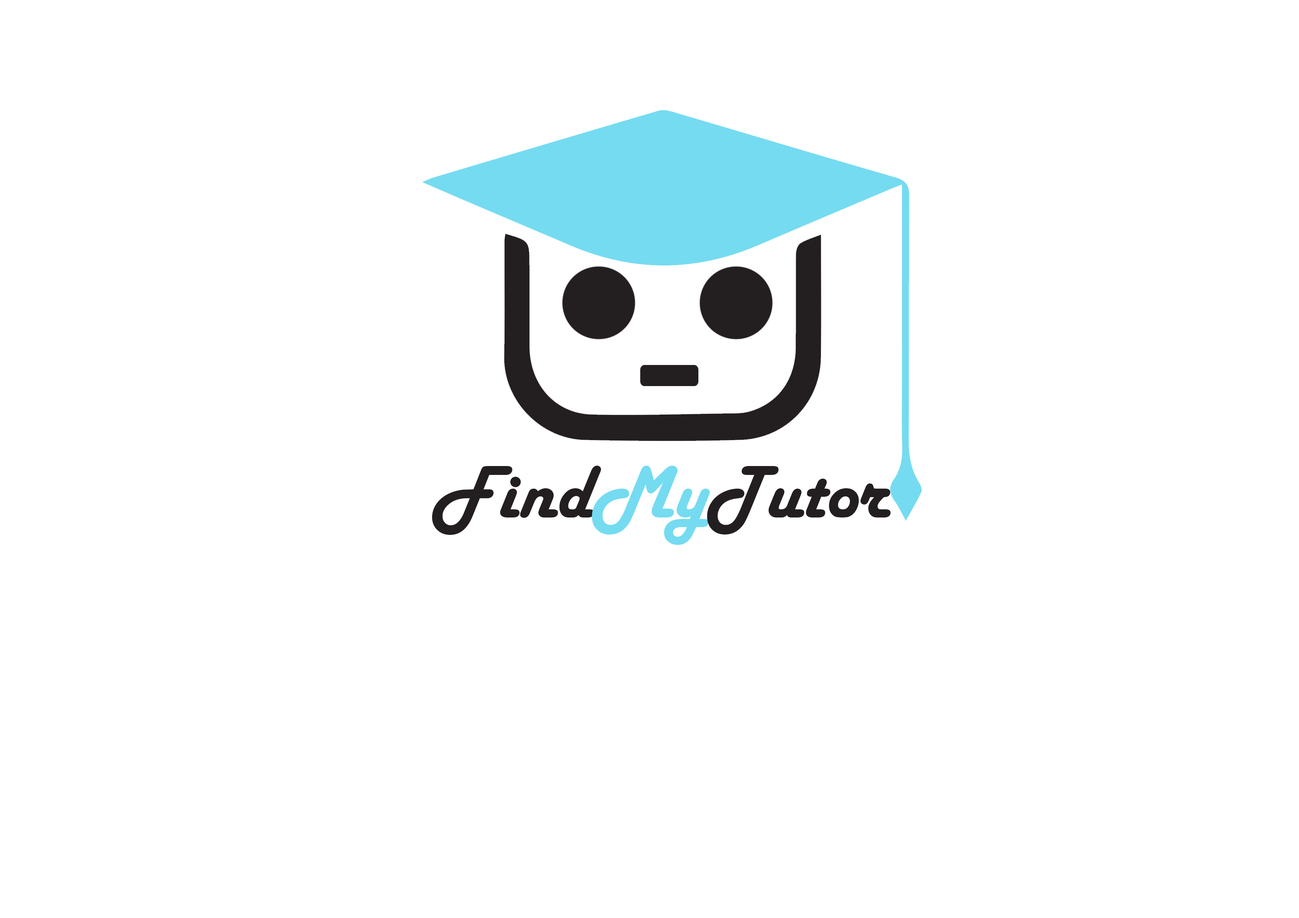
<style>
.page{position:relative;width:1299px;height:918px;background:#ffffff}
.page>*{position:absolute;margin:0}
.t1{font:77.1px "HarlowSolid";color:#231f20}
.t2{font:77.1px "HarlowSolid";color:#75dbf1}
</style>
<div class="page">
<p class="t1" style="left:432px;top:466px;width:458px;height:79px">Find<span class="t2">My</span>Tutor</p>
</div>
